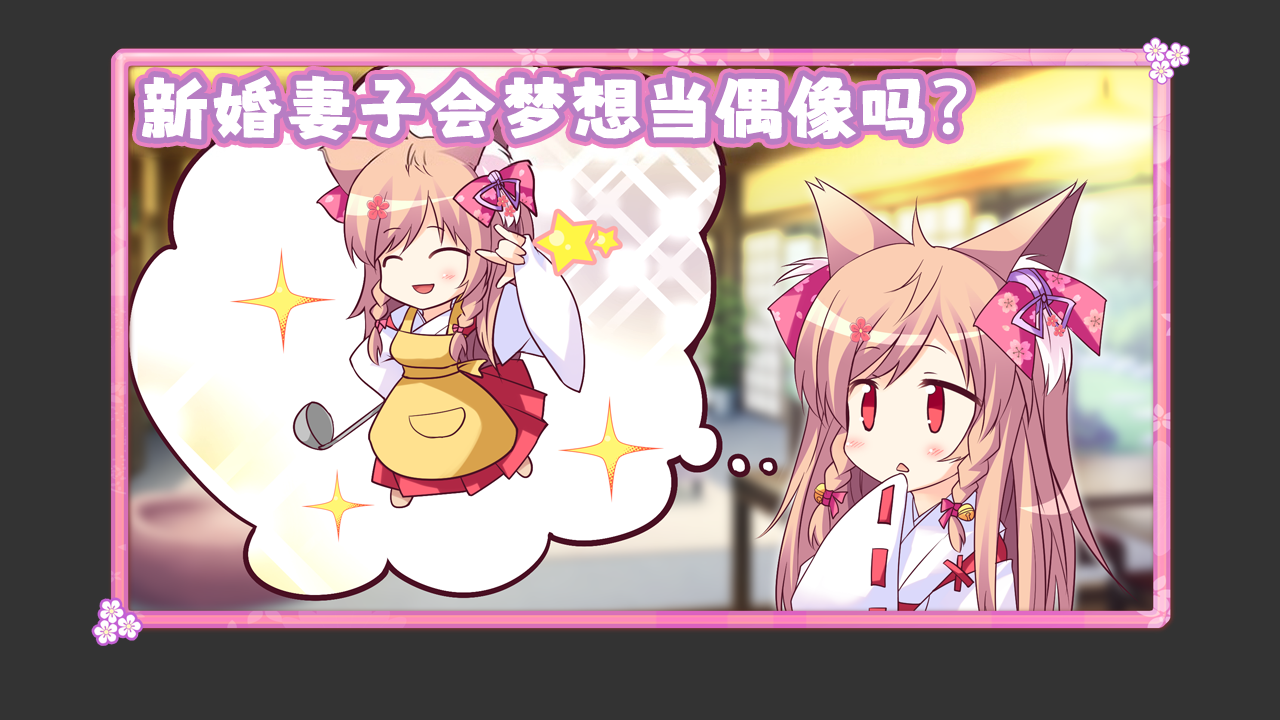
<style>
.page{position:relative;width:1280px;height:720px;background:#333333}
.page>*{position:absolute;margin:0}
.t1{font:70px "MaokenAssortedSans";color:#ffffff;font-weight:bold}
.t2{font:70px "AdobeHeitiStd-Regular";color:#ffffff;font-weight:bold}
</style>
<div class="page">
<p class="t1" style="left:142px;top:75px;width:825px;height:65px">新婚妻子会梦想当偶像吗<span class="t2">？</span></p>
</div>
